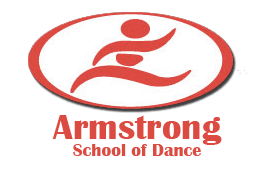
<style>
.page{position:relative;width:273px;height:172px;background:#ffffff}
.page>*{position:absolute;margin:0}
.t1{font:36px "BritannicBold";color:#dc4b42}
.t2{font:18px "BritannicBold";color:#dc4b42}
.t3{font:18px "BritannicBold";color:#dc4b42;text-transform:uppercase}
</style>
<div class="page">
<p class="t1" style="left:52px;top:115px;width:170px;height:30px">Armstrong</p>
<p class="t2" style="left:73px;top:144px;width:128px;height:12px"><span class="t3">S</span>chool of Dance</p>
</div>
